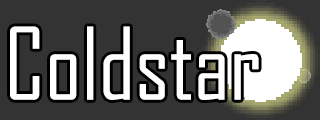
<style>
.page{position:relative;width:320px;height:120px;background:#333333}
.page>*{position:absolute;margin:0}
.t1{font:96px "AgencyFB-Reg";color:#ffffff}
</style>
<div class="page">
<p class="t1" style="left:10px;top:26px;width:249px;height:74px">Coldstar</p>
</div>
